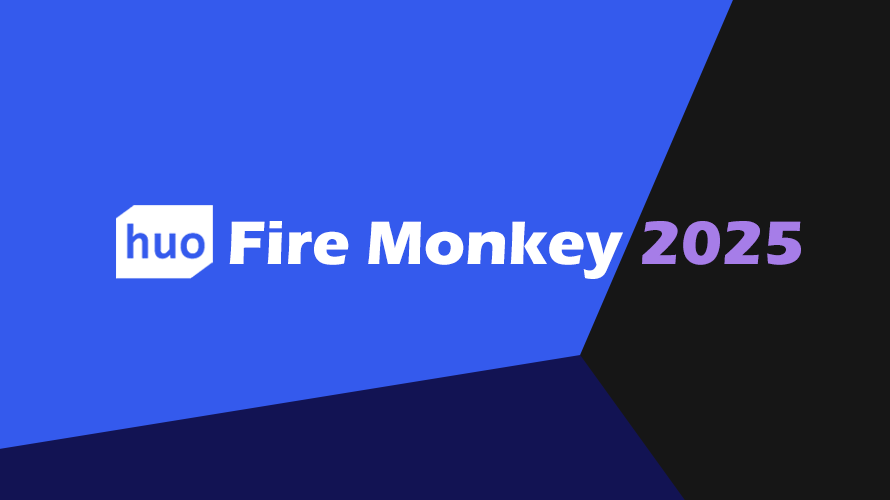
<style>
.page{position:relative;width:890px;height:500px;background:#345aed}
.page>*{position:absolute;margin:0}
.t1{font:63.3px "ErasITC-Bold";color:#ffffff}
.t2{font:63.3px "ErasITC-Bold";color:#a67de8}
</style>
<div class="page">
<p class="t1" style="left:229px;top:221px;width:394px;height:58px">Fire Monkey</p>
<p class="t2" style="left:642px;top:221px;width:159px;height:44px">2025</p>
</div>
